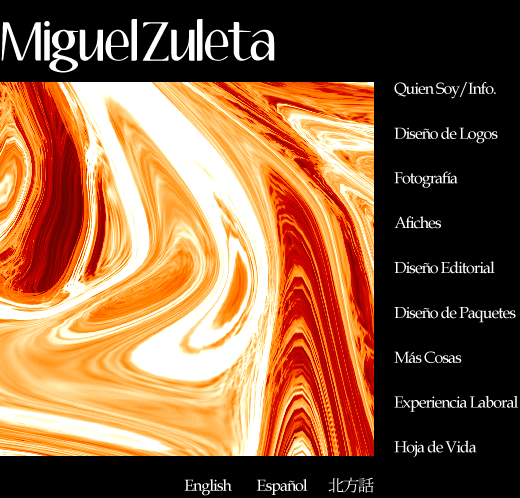
<style>
.page{position:relative;width:520px;height:498px;background:#000000}
.page>*{position:absolute;margin:0}
.t1{font:48px "Aubrey";letter-spacing:-0.06em;color:#ffffff}
.t2{font:16px/44.7px "BookAntiqua";letter-spacing:-0.06em;color:#ffffff}
.t3{font:16px/45px "BookAntiqua";letter-spacing:-0.06em;color:#ffffff}
.t4{font:16px "BookAntiqua";letter-spacing:-0.06em;color:#ffffff}
.t5{font:16px "KozMinStd-Regular";letter-spacing:-0.06em;color:#ffffff}
</style>
<div class="page">
<p class="t1" style="left:1px;top:19px;width:274px;height:54px">Miguel Zuleta</p>
<p class="t2" style="left:394px;top:82px;width:124px;height:375px">Quien Soy/Info.<br>Dise<span class="t3">ño de Logos<br></span>Fotografía<br>Afiches<br>Dise<span class="t3">ño Editorial<br></span>Dise<span class="t3">ño de Paquetes<br></span>Más Cosas<br>Experiencia Laboral<br>Hoja de Vida</p>
<p class="t4" style="left:184px;top:479px;width:48px;height:17px">English</p>
<p class="t4" style="left:257px;top:479px;width:51px;height:16px">Español</p>
<p class="t5" style="left:328px;top:477px;width:46px;height:16px">北方話</p>
</div>
